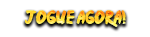
<style>
.page{position:relative;width:150px;height:37px;background:#ffffff}
.page>*{position:absolute;margin:0}
.t1{font:15px "Ninja-Naruto"}
</style>
<div class="page">
<p class="t1" style="left:25px;top:10px;width:101px;height:17px">jogue agora!</p>
</div>
